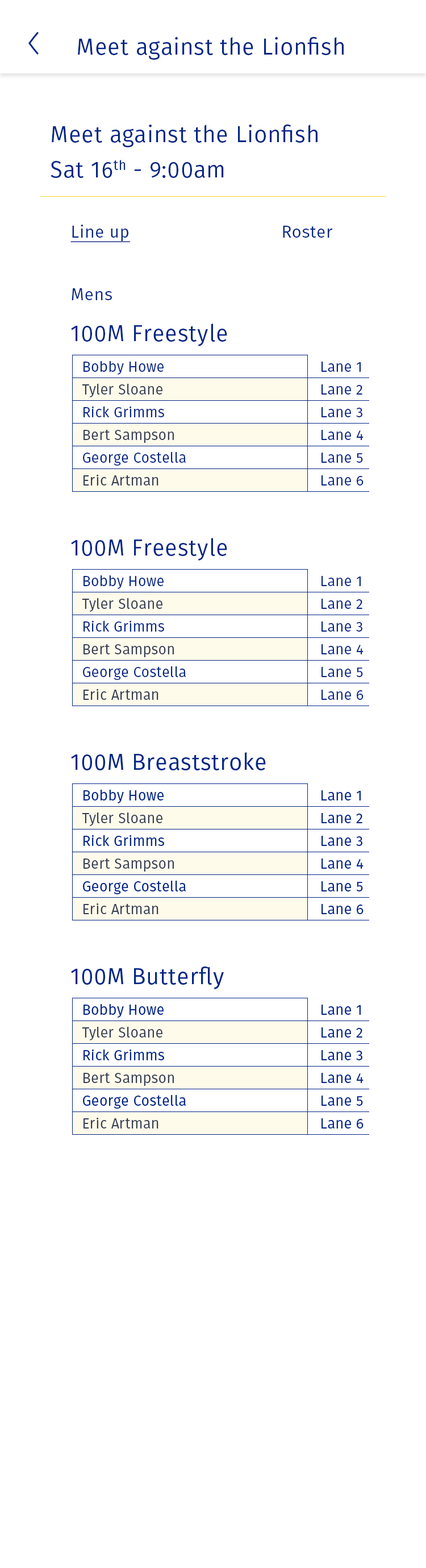
<style>
.page{position:relative;width:426px;height:1568px;background:#ffffff}
.page>*{position:absolute;margin:0}
.t1{font:22.7px "FiraSans-Book";letter-spacing:0.02em;color:#052686}
.t2{font:17.1px "FiraSans-Book";letter-spacing:0.02em;color:#052686;text-decoration:underline}
.t3{font:17.1px "FiraSans-Book";letter-spacing:0.02em;color:#052686}
.t4{font:14.2px "FiraSans-Book";letter-spacing:0.02em;color:#052686}
.t5{font:14.2px "FiraSans-Book";letter-spacing:0.02em;color:#373e53}
</style>
<div class="page">
<p class="t1" style="left:78px;top:37px;width:266px;height:23px">Meet against the Lionfish</p>
<p class="t1" style="left:52px;top:125px;width:266px;height:22px">Meet against the Lionfish</p>
<p class="t1" style="left:51px;top:160px;width:173px;height:18px">Sat 16th - 9:00am</p>
<p class="t2" style="left:70px;top:225px;width:60px;height:17px">Line up</p>
<p class="t3" style="left:283px;top:226px;width:50px;height:12px">Roster</p>
<p class="t3" style="left:72px;top:288px;width:40px;height:12px">Mens</p>
<p class="t1" style="left:71px;top:323px;width:156px;height:23px">100M Freestyle</p>
<p class="t4" style="left:84px;top:361px;width:80px;height:14px">Bobby Howe</p>
<p class="t4" style="left:322px;top:362px;width:39px;height:10px">Lane 1</p>
<p class="t5" style="left:82px;top:384px;width:81px;height:13px">Tyler Sloane</p>
<p class="t4" style="left:322px;top:384px;width:41px;height:11px">Lane 2</p>
<p class="t4" style="left:84px;top:406px;width:80px;height:11px">Rick Grimms</p>
<p class="t4" style="left:322px;top:407px;width:41px;height:10px">Lane 3</p>
<p class="t5" style="left:84px;top:429px;width:90px;height:14px">Bert Sampson</p>
<p class="t4" style="left:322px;top:430px;width:42px;height:10px">Lane 4</p>
<p class="t4" style="left:83px;top:452px;width:103px;height:14px">George Costella</p>
<p class="t4" style="left:322px;top:453px;width:41px;height:10px">Lane 5</p>
<p class="t5" style="left:84px;top:474px;width:75px;height:12px">Eric Artman</p>
<p class="t4" style="left:322px;top:475px;width:42px;height:11px">Lane 6</p>
<p class="t1" style="left:71px;top:538px;width:156px;height:23px">100M Freestyle</p>
<p class="t4" style="left:84px;top:575px;width:80px;height:14px">Bobby Howe</p>
<p class="t4" style="left:322px;top:576px;width:39px;height:10px">Lane 1</p>
<p class="t5" style="left:82px;top:598px;width:81px;height:14px">Tyler Sloane</p>
<p class="t4" style="left:322px;top:599px;width:41px;height:10px">Lane 2</p>
<p class="t4" style="left:84px;top:620px;width:80px;height:12px">Rick Grimms</p>
<p class="t4" style="left:322px;top:621px;width:41px;height:11px">Lane 3</p>
<p class="t5" style="left:84px;top:644px;width:90px;height:13px">Bert Sampson</p>
<p class="t4" style="left:322px;top:644px;width:42px;height:10px">Lane 4</p>
<p class="t4" style="left:83px;top:666px;width:103px;height:14px">George Costella</p>
<p class="t4" style="left:322px;top:667px;width:41px;height:10px">Lane 5</p>
<p class="t5" style="left:84px;top:688px;width:75px;height:12px">Eric Artman</p>
<p class="t4" style="left:322px;top:690px;width:42px;height:10px">Lane 6</p>
<p class="t1" style="left:71px;top:752px;width:195px;height:18px">100M Breaststroke</p>
<p class="t4" style="left:84px;top:790px;width:80px;height:13px">Bobby Howe</p>
<p class="t4" style="left:322px;top:790px;width:39px;height:10px">Lane 1</p>
<p class="t5" style="left:82px;top:812px;width:81px;height:14px">Tyler Sloane</p>
<p class="t4" style="left:322px;top:813px;width:41px;height:10px">Lane 2</p>
<p class="t4" style="left:84px;top:835px;width:80px;height:11px">Rick Grimms</p>
<p class="t4" style="left:322px;top:836px;width:41px;height:10px">Lane 3</p>
<p class="t5" style="left:84px;top:858px;width:90px;height:14px">Bert Sampson</p>
<p class="t4" style="left:322px;top:858px;width:42px;height:11px">Lane 4</p>
<p class="t4" style="left:83px;top:881px;width:103px;height:13px">George Costella</p>
<p class="t4" style="left:322px;top:881px;width:41px;height:10px">Lane 5</p>
<p class="t5" style="left:84px;top:903px;width:75px;height:11px">Eric Artman</p>
<p class="t4" style="left:322px;top:904px;width:42px;height:10px">Lane 6</p>
<p class="t1" style="left:71px;top:966px;width:153px;height:23px">100M Butterfly</p>
<p class="t4" style="left:84px;top:1004px;width:80px;height:14px">Bobby Howe</p>
<p class="t4" style="left:322px;top:1005px;width:39px;height:10px">Lane 1</p>
<p class="t5" style="left:82px;top:1027px;width:81px;height:13px">Tyler Sloane</p>
<p class="t4" style="left:322px;top:1027px;width:41px;height:11px">Lane 2</p>
<p class="t4" style="left:84px;top:1049px;width:80px;height:11px">Rick Grimms</p>
<p class="t4" style="left:322px;top:1050px;width:41px;height:10px">Lane 3</p>
<p class="t5" style="left:84px;top:1072px;width:90px;height:14px">Bert Sampson</p>
<p class="t4" style="left:322px;top:1073px;width:42px;height:10px">Lane 4</p>
<p class="t4" style="left:83px;top:1095px;width:103px;height:14px">George Costella</p>
<p class="t4" style="left:322px;top:1096px;width:41px;height:10px">Lane 5</p>
<p class="t5" style="left:84px;top:1117px;width:75px;height:12px">Eric Artman</p>
<p class="t4" style="left:322px;top:1118px;width:42px;height:11px">Lane 6</p>
</div>
